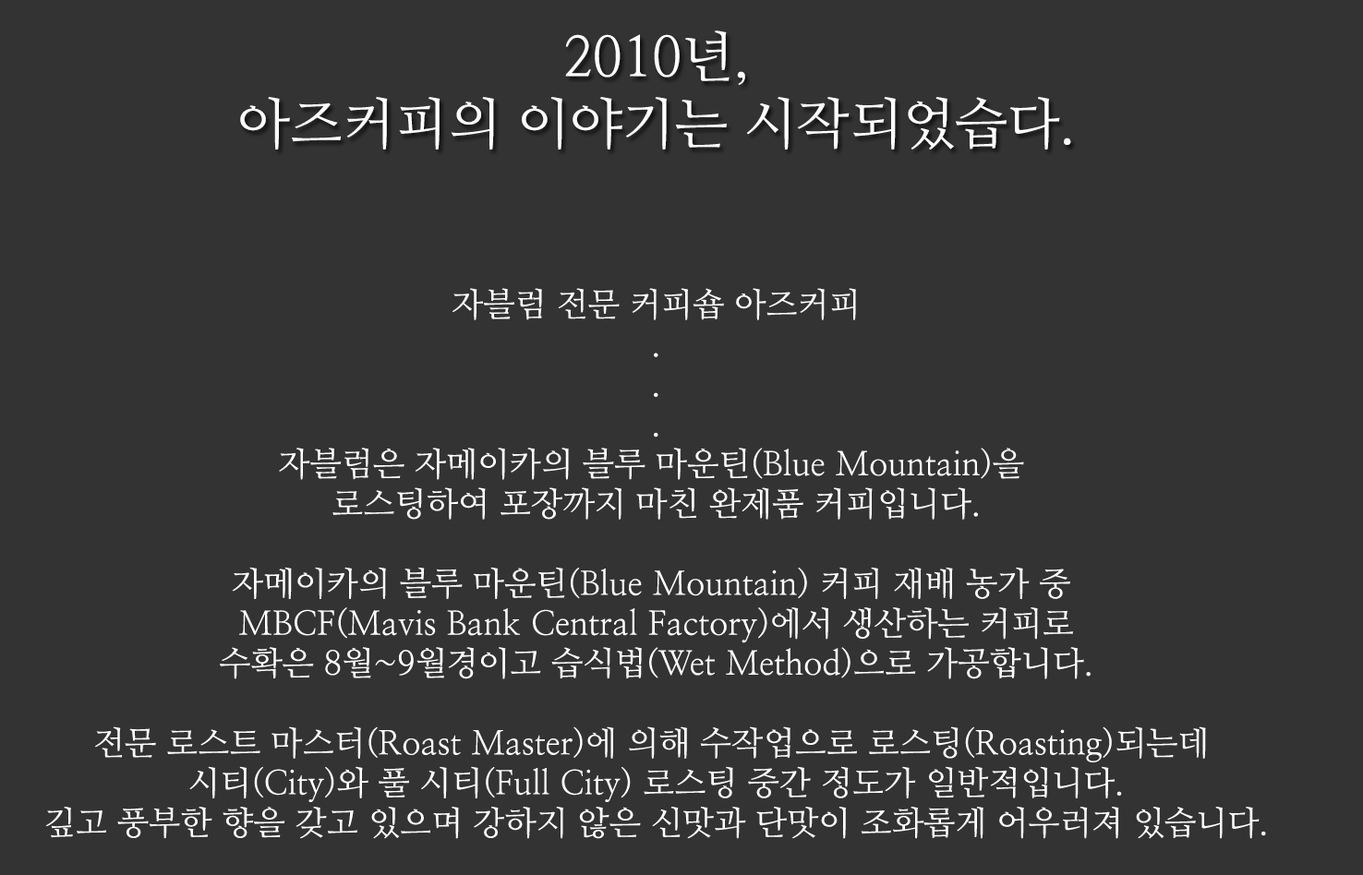
<style>
.page{position:relative;width:1363px;height:875px;background:#333333}
.page>*{position:absolute;margin:0}
.t1{font:55.4px "NanumMyeongjo";color:#ffffff}
.t2{font:33.2px "NanumMyeongjo";color:#ffffff}
</style>
<div class="page">
<p class="t1" style="left:240px;top:30px;width:831px;height:120px;text-align:center">2010년,<br>아즈커피의 이야기는 시작되었습다.</p>
<p class="t2" style="left:45px;top:288px;width:1221px;height:551px;text-align:center">자블럼 전문 커피숍 아즈커피<br>.<br>.<br>.<br>자블럼은 자메이카의 블루 마운틴(Blue Mountain)을 <br>로스팅하여 포장까지 마친 완제품 커피입니다.<br><br>자메이카의 블루 마운틴(Blue Mountain) 커피 재배 농가 중 <br>MBCF(Mavis Bank Central Factory)에서 생산하는 커피로<br>수확은 8월~9월경이고 습식법(Wet Method)으로 가공합니다.<br><br>전문 로스트 마스터(Roast Master)에 의해 수작업으로 로스팅(Roasting)되는데 <br>시티(City)와 풀 시티(Full City) 로스팅 중간 정도가 일반적입니다.<br>깊고 풍부한 향을 갖고 있으며 강하지 않은 신맛과 단맛이 조화롭게 어우러져 있습니다.</p>
</div>
